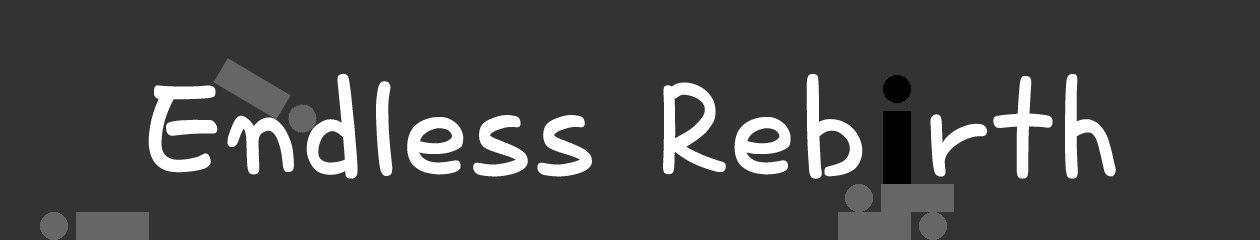
<style>
.page{position:relative;width:1260px;height:240px;background:#333333}
.page>*{position:absolute;margin:0}
.t1{font:200px "SDMiSaeng";color:#ffffff}
</style>
<div class="page">
<p class="t1" style="left:148px;top:73px;width:968px;height:106px">Endless Reb rth</p>
</div>
